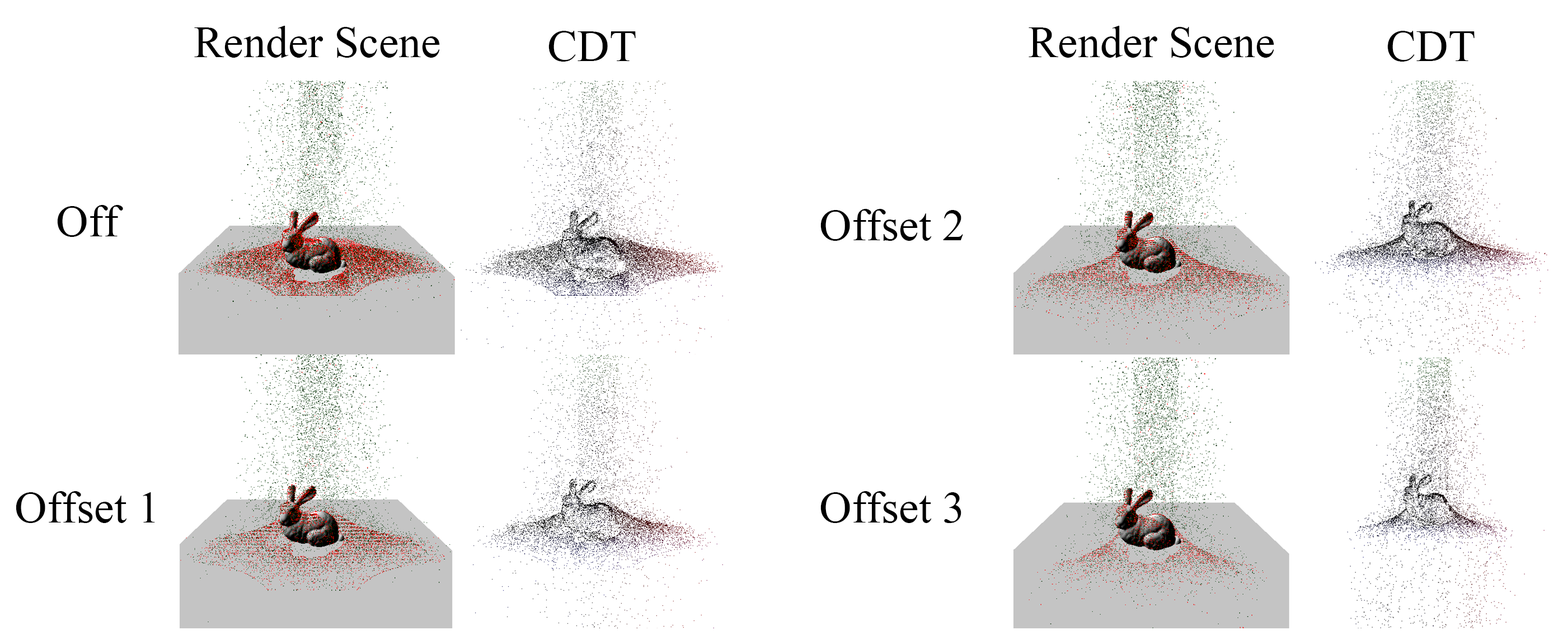
<style>
.page{position:relative;width:1568px;height:644px;background:#ffffff}
.page>*{position:absolute;margin:0}
.t1{font:44.8px "TimesNewRomanPSMT";color:#000000}
</style>
<div class="page">
<p class="t1" style="left:194px;top:26px;width:246px;height:32px">Render Scene</p>
<p class="t1" style="left:1029px;top:26px;width:245px;height:32px">Render Scene</p>
<p class="t1" style="left:548px;top:31px;width:88px;height:31px">CDT</p>
<p class="t1" style="left:1387px;top:31px;width:88px;height:31px">CDT</p>
<p class="t1" style="left:57px;top:205px;width:66px;height:32px">Off</p>
<p class="t1" style="left:820px;top:209px;width:143px;height:32px">Offset 2</p>
<p class="t1" style="left:16px;top:491px;width:139px;height:32px">Offset 1</p>
<p class="t1" style="left:820px;top:491px;width:141px;height:32px">Offset 3</p>
</div>
